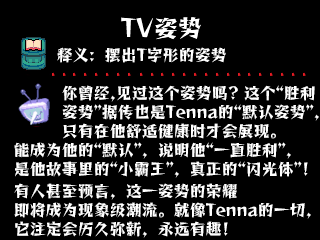
<style>
.page{position:relative;width:320px;height:240px;background:#000000}
.page>*{position:absolute;margin:0}
.t1{font:24px "Tiejili";color:#ffffff}
.t2{font:16px "Tiejili";color:#ffffff}
</style>
<div class="page">
<p class="t1" style="left:121px;top:17px;width:80px;height:23px">TV姿势</p>
<p class="t2" style="left:57px;top:47px;width:169px;height:16px">释义：摆出T字形的姿势</p>
<p class="t2" style="left:14px;top:85px;width:305px;height:153px">你曾经,见过这个姿势吗？这个“胜利<br>　　　姿势”据传也是Tenna的“默认姿势”，<br>　　　只有在他舒适健康时才会展现。<br>能成为他的“默认”，说明他“一直胜利”，<br>是他故事里的“小霸王”，真正的“闪光体”！<br><br>有人甚至预言，这一姿势的荣耀<br>即将成为现象级潮流。就像Tenna的一切，<br>它注定会历久弥新，永远有趣！</p>
</div>
